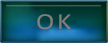
<style>
.page{position:relative;width:108px;height:43px}
.page>*{position:absolute;margin:0}
.t1{font:23px "Calibri";letter-spacing:0.1em;color:#7f7f80;scale:1.2 1}
</style>
<div class="page">
<p class="t1" style="left:37px;top:14px;width:34px;height:16px">OK</p>
</div>
